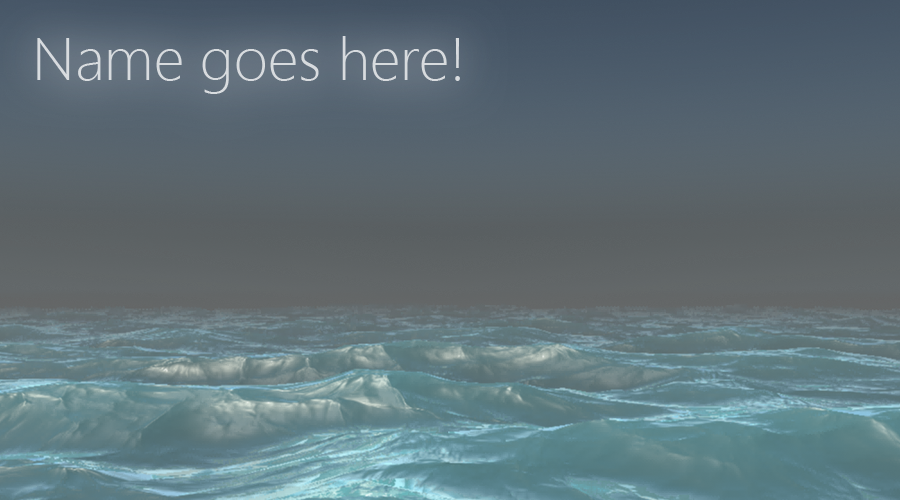
<style>
.page{position:relative;width:900px;height:500px}
.page>*{position:absolute;margin:0}
.t1{font:60px "SegoeUI-Light";color:#d8dbde}
</style>
<div class="page">
<p class="t1" style="left:37px;top:36px;width:423px;height:58px">Name goes here!</p>
</div>
